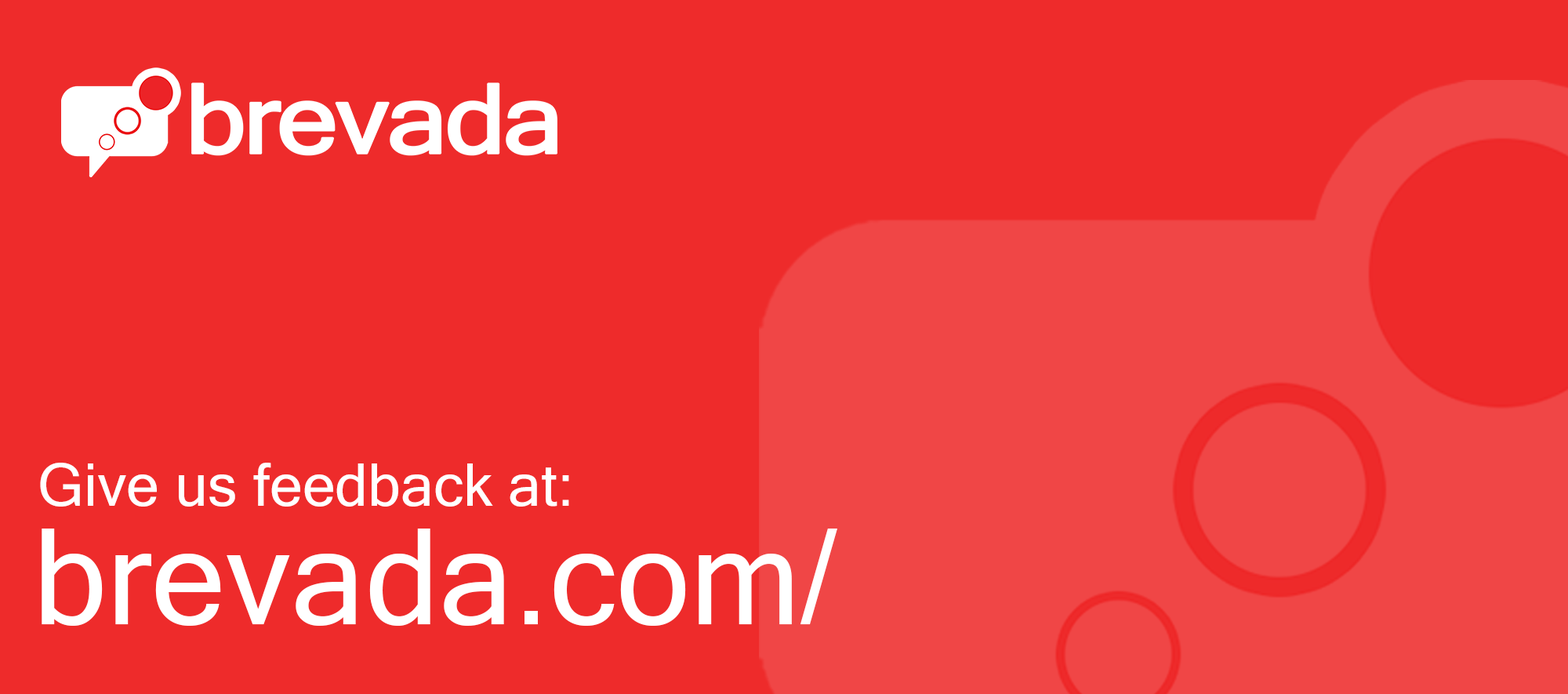
<style>
.page{position:relative;width:1568px;height:694px;background:#ee2b2b}
.page>*{position:absolute;margin:0}
.t1{font:59.1px "MicrosoftSansSerif";color:#ffffff}
.t2{font:132.9px "MicrosoftSansSerif";color:#ffffff}
</style>
<div class="page">
<p class="t1" style="left:40px;top:463px;width:529px;height:43px">Give us feedback at:</p>
<p class="t2" style="left:42px;top:528px;width:795px;height:98px">brevada.com/</p>
</div>
